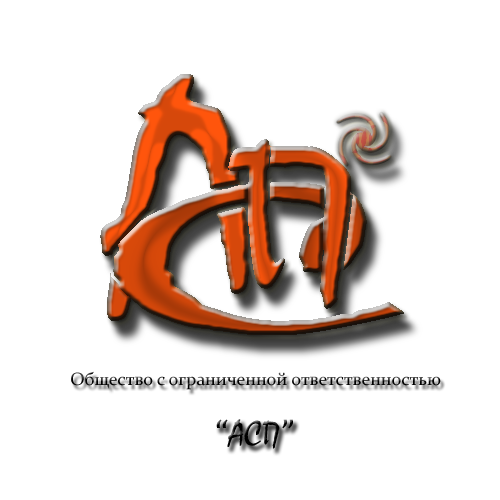
<style>
.page{position:relative;width:500px;height:500px;background:#ffffff}
.page>*{position:absolute;margin:0}
.t1{font:18px "Constantia"}
.t2{font:36px "Mistral";color:#000000}
.t3{font:36px "Cambria";color:#000000}
</style>
<div class="page">
<p class="t1" style="left:71px;top:371px;width:370px;height:19px">Общество с ограниченной ответственностью</p>
<p class="t2" style="left:216px;top:419px;width:77px;height:30px"><span class="t3">“</span>АСП<span class="t3">”</span></p>
</div>
